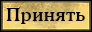
<style>
.page{position:relative;width:92px;height:32px}
.page>*{position:absolute;margin:0}
.t1{font:18px "CooperMediumCBT";letter-spacing:0.03em;color:#000000}
</style>
<div class="page">
<p class="t1" style="left:6px;top:8px;width:79px;height:16px">Принять</p>
</div>
